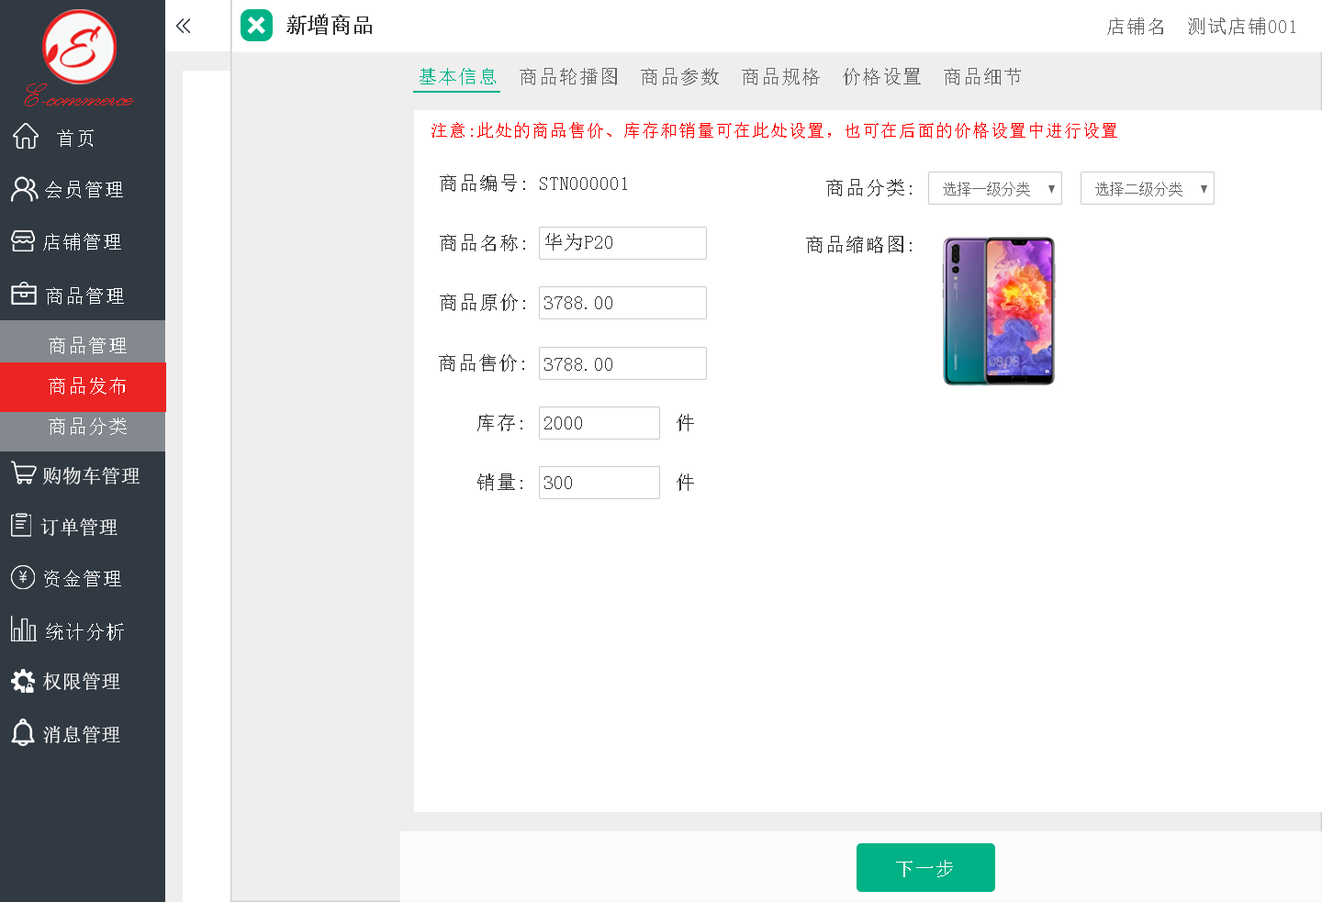
<style>
.page{position:relative;width:1322px;height:902px;background:#ffffff}
.page>*{position:absolute;margin:0}
.t1{font:22px "AdobeHeitiStd-Regular";color:#333333}
.t2{font:19.6px "NSimSun";color:#666666}
.t3{font:19.6px "NSimSun";color:#00b286}
.t4{font:41.1px "PalaceScriptMT";color:#eb2424}
.t5{font:17.1px "NSimSun";color:#ff0000}
.t6{font:19.6px "NSimSun";color:#feffff}
.t7{font:19.6px "NSimSun";color:#333333}
.t8{font:14.7px "NSimSun";color:#666666}
.t9{font:19.6px "NSimSun";color:#ffffff}
.t10{font:19.6px "SimSun";color:#ffffff}
</style>
<div class="page">
<p class="t1" style="left:286px;top:14px;width:86px;height:21px">新增商品</p>
<p class="t2" style="left:1107px;top:17px;width:188px;height:18px">店铺名  测试店铺001</p>
<p class="t2" style="left:419px;top:68px;width:602px;height:17px"><span class="t3">基本信息</span>  商品轮播图  商品参数  商品规格  价格设置  商品细节</p>
<p class="t4" style="left:25px;top:84px;width:109px;height:22px">E-commerce</p>
<p class="t5" style="left:431px;top:122px;width:686px;height:17px">注意:此处的商品售价、库存和销量可在此处设置，也可在后面的价格设置中进行设置</p>
<p class="t6" style="left:57px;top:129px;width:37px;height:18px">首页</p>
<p class="t6" style="left:45px;top:181px;width:78px;height:17px">会员管理</p>
<p class="t7" style="left:440px;top:174px;width:85px;height:18px">商品编号:</p>
<p class="t7" style="left:540px;top:177px;width:87px;height:13px">STN000001</p>
<p class="t7" style="left:826px;top:179px;width:85px;height:17px">商品分类:</p>
<p class="t8" style="left:943px;top:182px;width:87px;height:14px">选择一级分类</p>
<p class="t8" style="left:1095px;top:182px;width:87px;height:14px">选择二级分类</p>
<p class="t6" style="left:43px;top:233px;width:78px;height:18px">店铺管理</p>
<p class="t7" style="left:545px;top:233px;width:67px;height:18px">华为P20</p>
<p class="t7" style="left:440px;top:234px;width:85px;height:17px">商品名称:</p>
<p class="t7" style="left:806px;top:236px;width:105px;height:17px">商品缩略图:</p>
<p class="t6" style="left:46px;top:287px;width:78px;height:18px">商品管理</p>
<p class="t7" style="left:440px;top:294px;width:85px;height:17px">商品原价:</p>
<p class="t7" style="left:544px;top:296px;width:68px;height:13px">3788.00</p>
<p class="t9" style="left:49px;top:337px;width:78px;height:17px">商品管理</p>
<p class="t7" style="left:439px;top:354px;width:85px;height:18px">商品售价:</p>
<p class="t7" style="left:544px;top:358px;width:68px;height:13px">3788.00</p>
<p class="t9" style="left:49px;top:377px;width:77px;height:18px">商品发布</p>
<p class="t7" style="left:477px;top:414px;width:45px;height:17px">库存:</p>
<p class="t7" style="left:676px;top:414px;width:18px;height:17px">件</p>
<p class="t9" style="left:49px;top:418px;width:78px;height:17px">商品分类</p>
<p class="t7" style="left:544px;top:417px;width:38px;height:13px">2000</p>
<p class="t10" style="left:42px;top:467px;width:98px;height:18px">购物车管理</p>
<p class="t7" style="left:477px;top:474px;width:45px;height:17px">销量:</p>
<p class="t7" style="left:676px;top:474px;width:18px;height:17px">件</p>
<p class="t7" style="left:544px;top:476px;width:28px;height:13px">300</p>
<p class="t10" style="left:40px;top:519px;width:77px;height:17px">订单管理</p>
<p class="t6" style="left:44px;top:570px;width:77px;height:17px">资金管理</p>
<p class="t6" style="left:46px;top:623px;width:78px;height:18px">统计分析</p>
<p class="t10" style="left:43px;top:673px;width:77px;height:17px">权限管理</p>
<p class="t10" style="left:43px;top:726px;width:77px;height:17px">消息管理</p>
<p class="t9" style="left:896px;top:860px;width:57px;height:17px">下一步</p>
</div>
